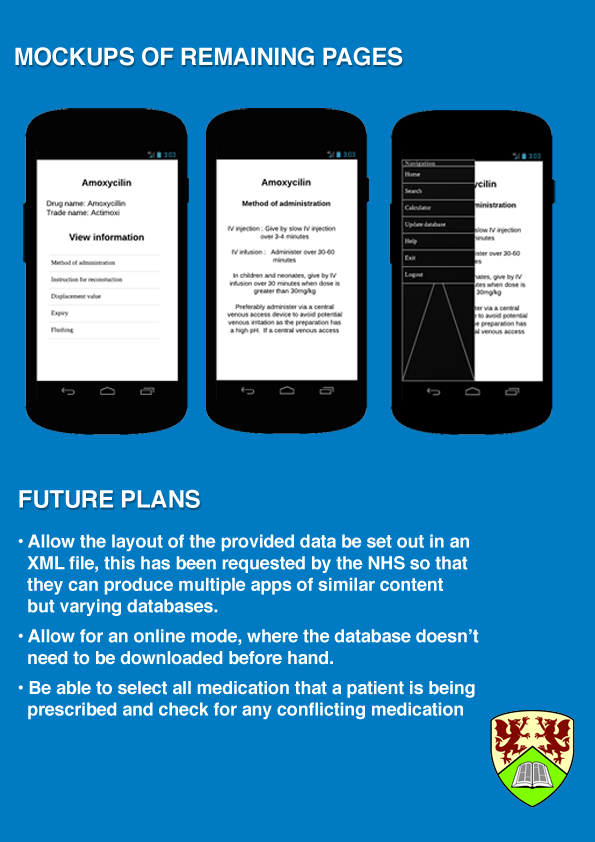
<style>
.page{position:relative;width:595px;height:842px;background:#007bc3}
.page>*{position:absolute;margin:0}
.t1{font:24px "Helvetica-Bold";letter-spacing:-0.01em;color:#ffffff}
.t2{font:18px "Helvetica-Bold";letter-spacing:-0.01em;color:#ffffff}
.t3{font:18px/30px "Helvetica-Bold";letter-spacing:-0.01em;color:#ffffff}
</style>
<div class="page">
<p class="t1" style="left:15px;top:47px;width:388px;height:19px">MOCKUPS OF REMAINING PAGES</p>
<p class="t1" style="left:19px;top:489px;width:181px;height:19px">FUTURE PLANS</p>
<p class="t2" style="left:18px;top:534px;width:461px;height:186px">• Allow the layout of the provided data be set out in an<br>  XML file, this has been requested by the NHS so that<br>  they can produce multiple apps of similar content<br>  but varying databases.<br><span class="t3">• Allow for an online mode, where the database doesn’t<br></span>  need to be downloaded before hand.<br><span class="t3">• Be able to select all medication that a patient is being<br></span>  prescribed and check for any conflicting medication</p>
</div>
